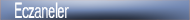
<style>
.page{position:relative;width:190px;height:20px}
.page>*{position:absolute;margin:0}
.t1{font:21.6px "MS Sans Serif";color:#ffffff;scale:0.57 1}
</style>
<div class="page">
<p class="t1" style="left:15px;top:2px;width:54px;height:16px">Eczaneler</p>
</div>
